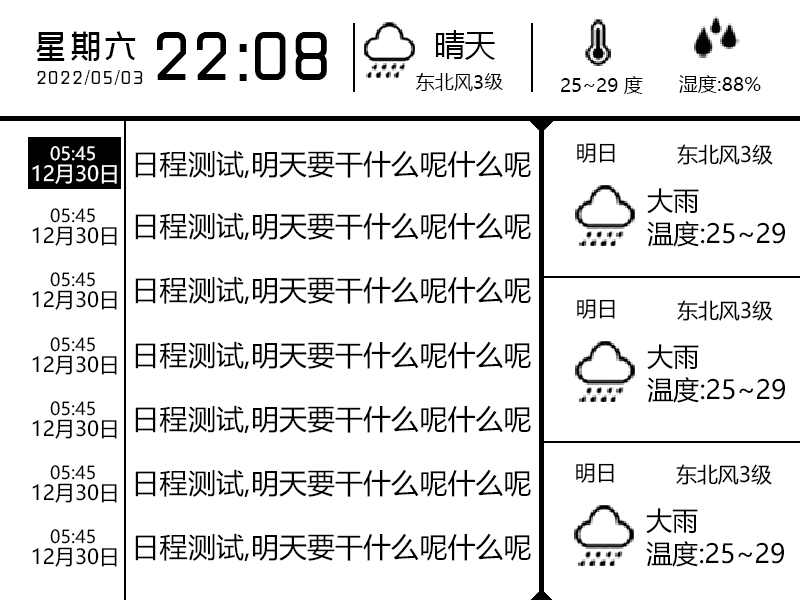
<style>
.page{position:relative;width:800px;height:600px;background:#ffffff}
.page>*{position:absolute;margin:0}
.t1{font:30.6px "MicrosoftYaHei";color:#000000}
.t2{font:32.6px "SJxinhei-Regular";letter-spacing:0.08em;color:#000000}
.t3{font:67.6px "SJxinhei-Regular";color:#000000}
.t4{font:18px "SJxinhei-Regular";letter-spacing:0.08em;color:#000000}
.t5{font:19.1px "MicrosoftYaHei";color:#000000}
.t6{font:18.9px "MicrosoftYaHei";color:#000000}
.t7{font:19.2px "MicrosoftYaHei";color:#000000}
.t8{font:17.9px "MicrosoftYaHei";color:#ffffff}
.t9{font:28.1px "MicrosoftYaHei";color:#000000}
.t10{font:21px "MicrosoftYaHei";color:#000000}
.t11{font:20.4px "MicrosoftYaHei";color:#fffefe}
.t12{font:26.3px "MicrosoftYaHei";color:#000000}
.t13{font:17.9px "MicrosoftYaHei";color:#000000}
.t14{font:20.4px "MicrosoftYaHei";color:#000000}
</style>
<div class="page">
<p class="t1" style="left:436px;top:30px;width:60px;height:30px">晴天</p>
<p class="t2" style="left:36px;top:31px;width:100px;height:30px">星期六</p>
<p class="t3" style="left:157px;top:32px;width:170px;height:49px">22:08</p>
<p class="t4" style="left:37px;top:70px;width:106px;height:15px">2022/05/03</p>
<p class="t5" style="left:416px;top:73px;width:87px;height:18px">东北风3级</p>
<p class="t6" style="left:561px;top:76px;width:82px;height:18px">25~29 度</p>
<p class="t7" style="left:679px;top:75px;width:82px;height:18px">湿度:88%</p>
<p class="t8" style="left:50px;top:146px;width:45px;height:15px">05:45</p>
<p class="t9" style="left:135px;top:150px;width:396px;height:28px">日程测试,明天要干什么呢什么呢</p>
<p class="t10" style="left:577px;top:143px;width:38px;height:20px">明日</p>
<p class="t10" style="left:677px;top:144px;width:96px;height:21px">东北风3级</p>
<p class="t11" style="left:32px;top:164px;width:85px;height:20px">12月30日</p>
<p class="t12" style="left:647px;top:188px;width:52px;height:26px">大雨</p>
<p class="t13" style="left:50px;top:208px;width:45px;height:15px">05:45</p>
<p class="t9" style="left:135px;top:212px;width:396px;height:28px">日程测试,明天要干什么呢什么呢</p>
<p class="t12" style="left:647px;top:221px;width:138px;height:26px">温度:25~29</p>
<p class="t14" style="left:32px;top:226px;width:85px;height:20px">12月30日</p>
<p class="t13" style="left:50px;top:272px;width:45px;height:15px">05:45</p>
<p class="t9" style="left:135px;top:276px;width:396px;height:28px">日程测试,明天要干什么呢什么呢</p>
<p class="t14" style="left:32px;top:290px;width:85px;height:20px">12月30日</p>
<p class="t10" style="left:577px;top:299px;width:38px;height:20px">明日</p>
<p class="t10" style="left:677px;top:300px;width:96px;height:21px">东北风3级</p>
<p class="t13" style="left:50px;top:337px;width:45px;height:15px">05:45</p>
<p class="t9" style="left:135px;top:341px;width:396px;height:28px">日程测试,明天要干什么呢什么呢</p>
<p class="t12" style="left:647px;top:344px;width:52px;height:26px">大雨</p>
<p class="t14" style="left:32px;top:355px;width:85px;height:20px">12月30日</p>
<p class="t12" style="left:647px;top:377px;width:138px;height:26px">温度:25~29</p>
<p class="t13" style="left:50px;top:401px;width:45px;height:15px">05:45</p>
<p class="t9" style="left:135px;top:405px;width:396px;height:28px">日程测试,明天要干什么呢什么呢</p>
<p class="t14" style="left:32px;top:419px;width:85px;height:20px">12月30日</p>
<p class="t13" style="left:50px;top:465px;width:45px;height:15px">05:45</p>
<p class="t9" style="left:135px;top:469px;width:396px;height:28px">日程测试,明天要干什么呢什么呢</p>
<p class="t10" style="left:576px;top:463px;width:38px;height:20px">明日</p>
<p class="t10" style="left:676px;top:464px;width:96px;height:21px">东北风3级</p>
<p class="t14" style="left:32px;top:483px;width:85px;height:20px">12月30日</p>
<p class="t12" style="left:646px;top:508px;width:52px;height:26px">大雨</p>
<p class="t13" style="left:50px;top:529px;width:45px;height:15px">05:45</p>
<p class="t9" style="left:135px;top:533px;width:396px;height:28px">日程测试,明天要干什么呢什么呢</p>
<p class="t12" style="left:646px;top:541px;width:138px;height:26px">温度:25~29</p>
<p class="t14" style="left:32px;top:547px;width:85px;height:20px">12月30日</p>
</div>
